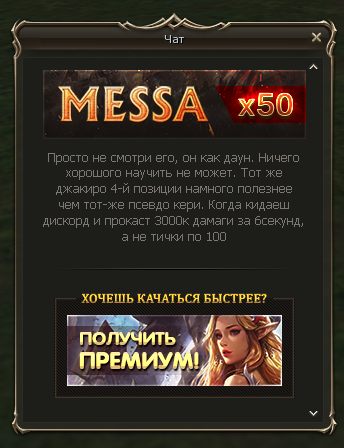
<style>
.page{position:relative;width:344px;height:448px;background:#1d1e19}
.page>*{position:absolute;margin:0}
.t1{font:41.3px "Tunga-Bold"}
.t2{font:13.3px "Tahoma";color:#7c786f}
.t3{font:13.3px "CambriaMath"}
.t4{font:18.7px "VAGWorld-Bold"}
.t5{font:24px "VAGWorld-Bold"}
</style>
<div class="page">
<p class="t1" style="left:238px;top:93px;width:55px;height:23px">x50</p>
<p class="t2" style="left:43px;top:153px;width:260px;height:88px;text-align:center">Просто не смотри его, он как даун. Ничего<br>хорошого научить не может. Тот же<br>джакиро 4-й позиции намного полезнее<br>чем тот-же псевдо кери. Когда кидаеш<br>дискорд и прокаст 3000к дамаги за 6секунд,<br>а не тички по 100</p>
<p class="t3" style="left:81px;top:293px;width:186px;height:9px">ХОЧЕШЬ КАЧАТЬСЯ БЫСТРЕЕ?</p>
<p class="t3" style="left:81px;top:294px;width:186px;height:9px">ХОЧЕШЬ КАЧАТЬСЯ БЫСТРЕЕ?</p>
<p class="t4" style="left:80px;top:332px;width:96px;height:13px">ПОЛУЧИТЬ</p>
<p class="t5" style="left:79px;top:352px;width:120px;height:17px">ПРЕМИУМ!</p>
</div>
